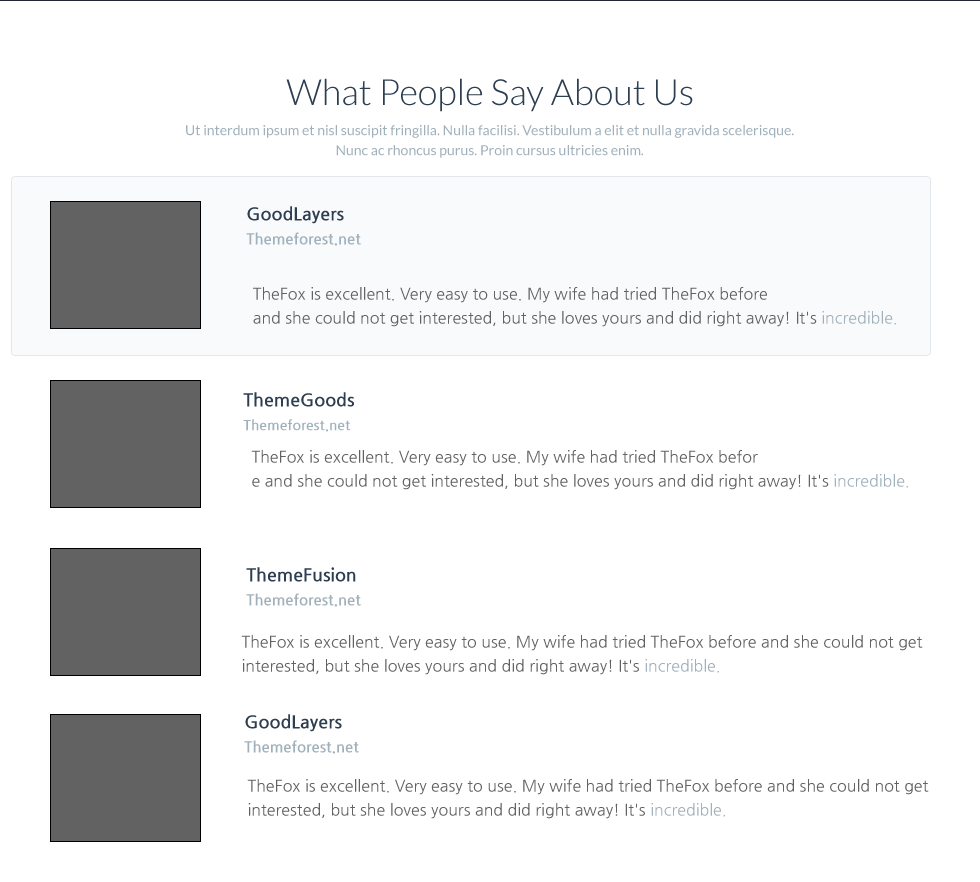
<style>
.page{position:relative;width:980px;height:882px;background:#ffffff}
.page>*{position:absolute;margin:0}
.t1{font:36px "Lato-Light";color:#2c3e50}
.t2{font:14px/20px "Lato-Regular";color:#a1b1bc}
.t3{font:15px/24px "NanumGothicBold";color:#a1b1bc}
.t4{font:18px/24px "NanumGothicBold";color:#2c3e50}
.t5{font:16px/24px "NanumGothic";color:#626262}
.t6{font:16px/24px "NanumGothic";color:#a1b1bc}
.t7{font:14px/24px "NanumGothicBold";color:#a1b1bc}
</style>
<div class="page">
<p class="t1" style="left:286px;top:78px;width:407px;height:34px">What People Say About Us</p>
<p class="t2" style="left:186px;top:125px;width:608px;height:33px;text-align:center">Ut interdum ipsum et nisl suscipit fringilla. Nulla facilisi. Vestibulum a elit et nulla gravida scelerisque. Nunc ac rhoncus purus. Proin cursus ultricies enim.</p>
<p class="t3" style="left:246px;top:206px;width:115px;height:40px"><span class="t4">GoodLayers<br></span>Themeforest.net</p>
<p class="t5" style="left:253px;top:287px;width:643px;height:40px">TheFox is excellent. Very easy to use. My wife had tried TheFox before <br>and she could not get interested, but she loves yours and did right away! It's <span class="t6">incredible.</span></p>
<p class="t7" style="left:243px;top:392px;width:111px;height:40px"><span class="t4">ThemeGoods<br></span>Themeforest.net</p>
<p class="t5" style="left:251px;top:450px;width:657px;height:40px">TheFox is excellent. Very easy to use. My wife had tried TheFox befor<br>e and she could not get interested, but she loves yours and did right away! It's <span class="t6">incredible.</span></p>
<p class="t3" style="left:246px;top:567px;width:115px;height:40px"><span class="t4">ThemeFusion<br></span>Themeforest.net</p>
<p class="t5" style="left:241px;top:635px;width:682px;height:40px">TheFox is excellent. Very easy to use. My wife had tried TheFox before and she could not get interested, but she loves yours and did right away! It's <span class="t6">incredible.</span></p>
<p class="t3" style="left:244px;top:714px;width:115px;height:40px"><span class="t4">GoodLayers<br></span>Themeforest.net</p>
<p class="t5" style="left:247px;top:779px;width:682px;height:40px">TheFox is excellent. Very easy to use. My wife had tried TheFox before and she could not get interested, but she loves yours and did right away! It's <span class="t6">incredible.</span></p>
</div>
